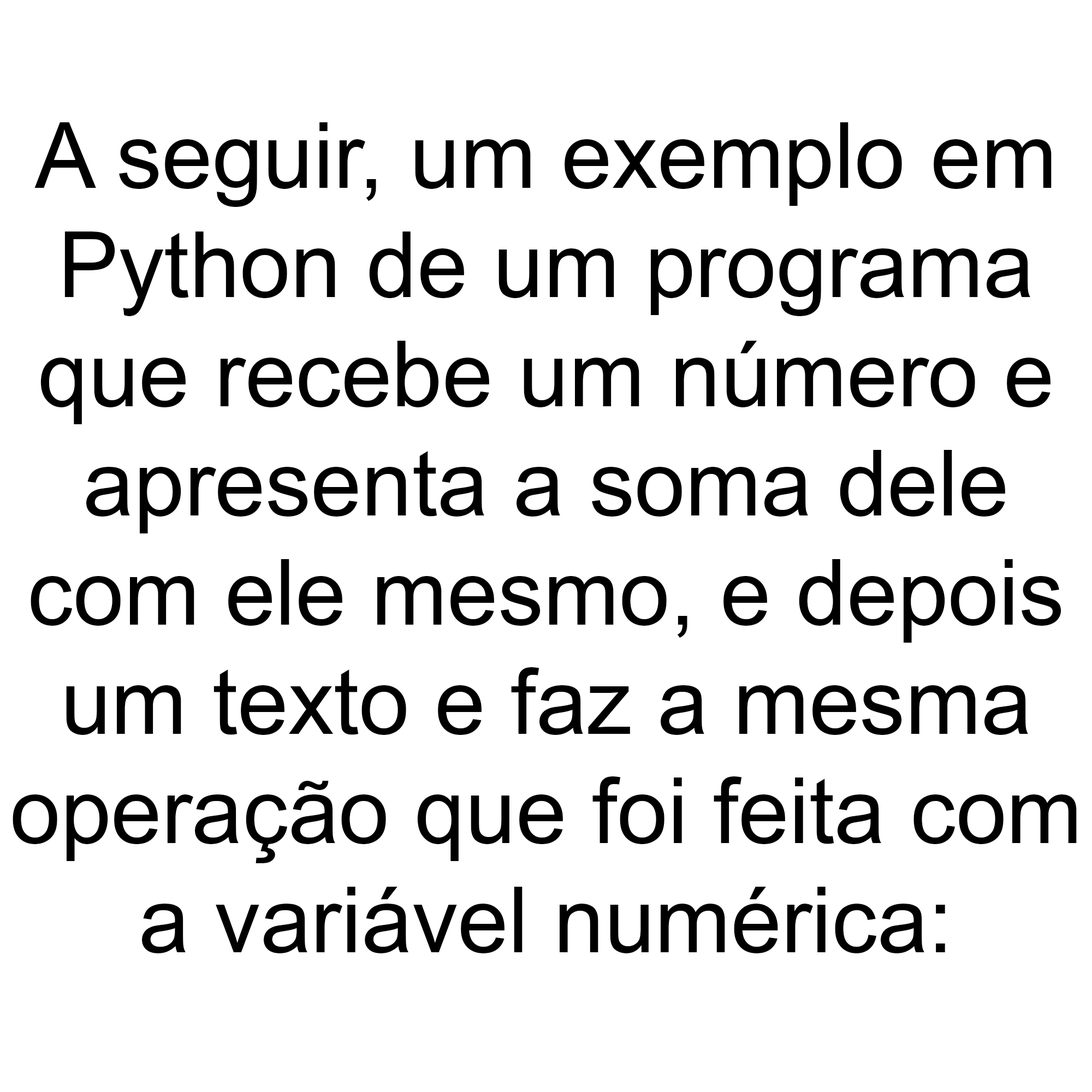
<style>
.page{position:relative;width:1092px;height:1092px;background:#ffffff}
.page>*{position:absolute;margin:0}
.t1{font:91px "ArialMT";color:#000000}
</style>
<div class="page">
<p class="t1" style="left:13px;top:122px;width:1064px;height:831px;text-align:center">A seguir, um exemplo em<br>Python de um programa<br>que recebe um número e<br>apresenta a soma dele<br>com ele mesmo, e depois<br>um texto e faz a mesma<br>operação que foi feita com<br>a variável numérica:</p>
</div>
